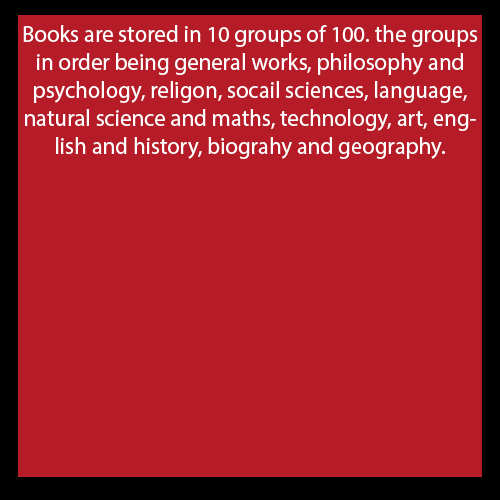
<style>
.page{position:relative;width:500px;height:500px;background:#b61c27}
.page>*{position:absolute;margin:0}
.t1{font:23.3px "MyriadPro-Regular";color:#ffffff}
</style>
<div class="page">
<p class="t1" style="left:23px;top:25px;width:455px;height:134px;text-align:center">Books are stored in 10 groups of 100. the groups in order being general works, philosophy and psychology, religon, socail sciences, language, natural science and maths, technology, art, english and history, biograhy and geography.</p>
</div>
